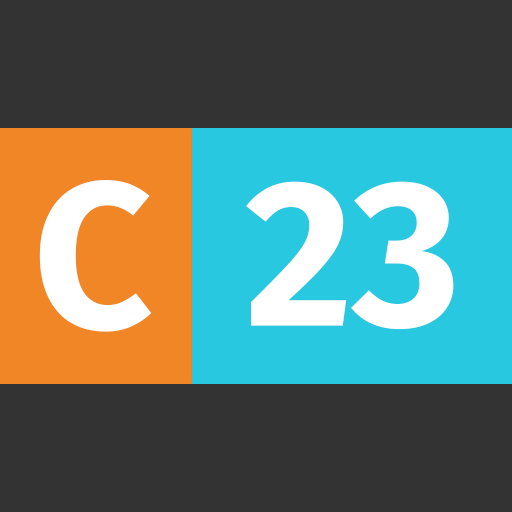
<style>
.page{position:relative;width:512px;height:512px;background:#333333}
.page>*{position:absolute;margin:0}
.t1{font:208.3px "FiraSans-Bold";color:#ffffff}
</style>
<div class="page">
<p class="t1" style="left:39px;top:180px;width:113px;height:152px">C</p>
<p class="t1" style="left:246px;top:181px;width:208px;height:149px">23</p>
</div>
